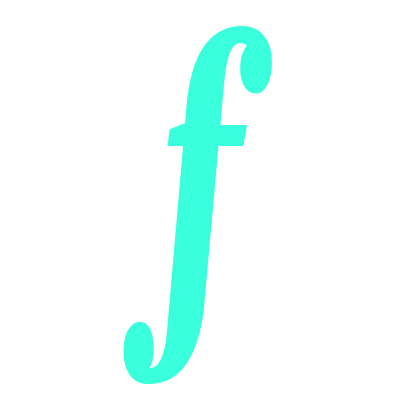
<style>
.page{position:relative;width:403px;height:403px;background:#ffffff}
.page>*{position:absolute;margin:0}
.t1{font:395.8px "AirNewzald-BlackItalic";color:#3affdc;scale:0.55 1}
</style>
<div class="page">
<p class="t1" style="left:123px;top:26px;width:149px;height:358px">f</p>
</div>
